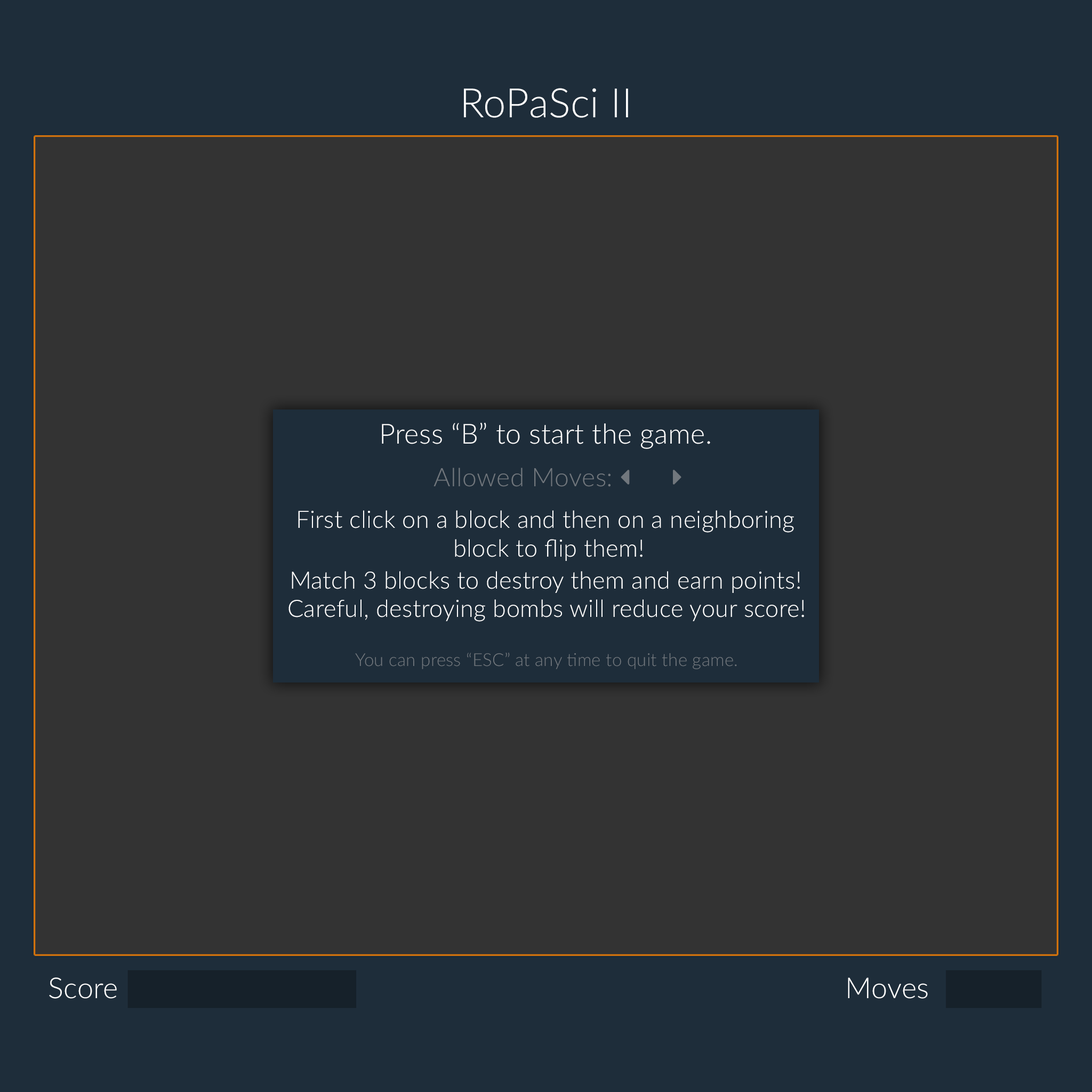
<style>
.page{position:relative;width:1092px;height:1092px;background:#333333}
.page>*{position:absolute;margin:0}
.t1{font:40.5px "Lato-Light";letter-spacing:0.01em;color:#ffffff}
.t2{font:27.7px "Lato-Light";letter-spacing:0.01em;color:#ffffff}
.t3{font:24px "Lato-Light";letter-spacing:0.01em;color:#ffffff}
.t4{font:17.6px "Lato-Light";letter-spacing:0.01em;color:#71777d}
.t5{font:28.8px "Lato-Light";letter-spacing:0.01em;color:#ffffff}
</style>
<div class="page">
<p class="t1" style="left:464px;top:88px;width:164px;height:30px">RoPaSci II</p>
<p class="t2" style="left:382px;top:422px;width:328px;height:27px">Press “B” to start the game.</p>
<p class="t3" style="left:298px;top:510px;width:496px;height:51px;text-align:center">First click on a block and then on a neighboring <br>block to flip them!</p>
<p class="t3" style="left:292px;top:571px;width:508px;height:22px">Match 3 blocks to destroy them and earn points!</p>
<p class="t3" style="left:288px;top:599px;width:516px;height:23px">Careful, destroying bombs will reduce your score!</p>
<p class="t4" style="left:355px;top:653px;width:382px;height:16px">You can press “ESC” at any time to quit the game.</p>
<p class="t5" style="left:49px;top:977px;width:68px;height:22px">Score</p>
<p class="t5" style="left:848px;top:977px;width:80px;height:22px">Moves</p>
</div>
